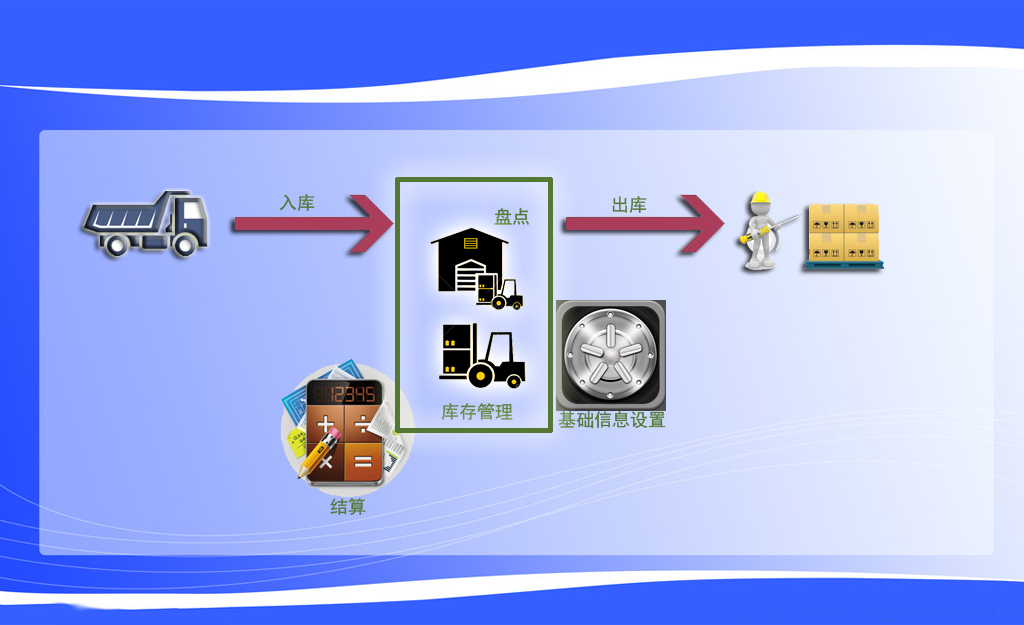
<style>
.page{position:relative;width:1024px;height:625px}
.page>*{position:absolute;margin:0}
.t1{font:18px "SimHei";color:#547834}
.t2{font:18px "SimHei";color:#678745}
</style>
<div class="page">
<p class="t1" style="left:279px;top:194px;width:36px;height:17px">入库</p>
<p class="t1" style="left:612px;top:196px;width:35px;height:17px">出库</p>
<p class="t1" style="left:494px;top:208px;width:35px;height:17px">盘点</p>
<p class="t2" style="left:441px;top:403px;width:72px;height:17px">库存管理</p>
<p class="t1" style="left:558px;top:411px;width:108px;height:18px">基础信息设置</p>
<p class="t1" style="left:330px;top:498px;width:36px;height:17px">结算</p>
</div>
